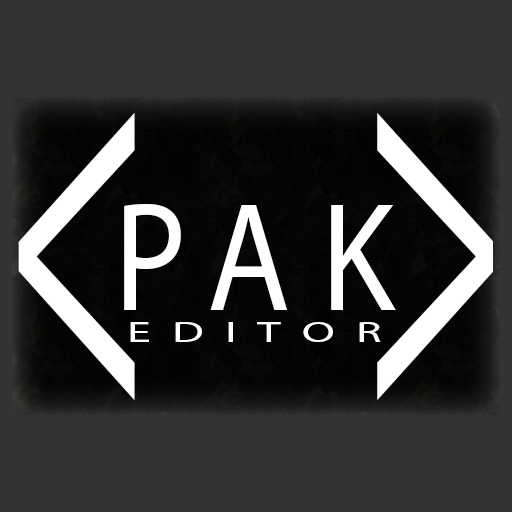
<style>
.page{position:relative;width:512px;height:512px;background:#333333}
.page>*{position:absolute;margin:0}
.t1{font:156px "MyriadPro-Regular";letter-spacing:0.235em;color:#ffffff;text-transform:uppercase;scale:0.87 1}
.t2{font:539.5px "MyriadPro-Regular";letter-spacing:-0.145em;color:#ffffff;text-transform:uppercase;scale:0.46 1}
.t3{font:156px "MyriadPro-Regular";letter-spacing:-0.245em;color:#ffffff;text-transform:uppercase;scale:0.87 1}
.t4{font:539.5px "MyriadPro-Regular";color:#ffffff;text-transform:uppercase;scale:0.46 1}
.t5{font:42.5px "MyriadPro-Regular";letter-spacing:0.44em;color:#ffffff;font-variant:small-caps;scale:1.61 1}
</style>
<div class="page">
<p class="t1" style="left:18px;top:113px;width:475px;height:287px"><span class="t2">&lt;</span>PA<span class="t3">K</span><span class="t4">&gt;</span></p>
<p class="t5" style="left:130px;top:322px;width:251px;height:20px">editor</p>
</div>
